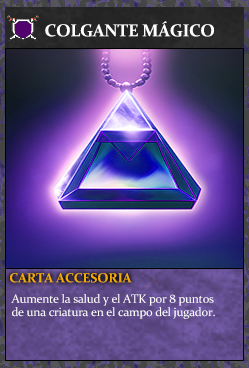
<style>
.page{position:relative;width:249px;height:368px}
.page>*{position:absolute;margin:0}
.t1{font:17.3px "Constantia-Bold";letter-spacing:-0.02em;color:#ffffff}
.t2{font:13.3px "Constantia-Bold";letter-spacing:-0.02em;color:#f2ac05}
.t3{font:12px/13.3px "Constantia";letter-spacing:-0.02em;color:#ffffff}
</style>
<div class="page">
<p class="t1" style="left:45px;top:21px;width:169px;height:16px">COLGANTE MÁGICO</p>
<p class="t2" style="left:10px;top:273px;width:122px;height:10px">CARTA ACCESORIA</p>
<p class="t3" style="left:11px;top:294px;width:204px;height:25px">Aumente la salud y el ATK por 8 puntos<br>de una criatura en el campo del jugador.</p>
</div>
